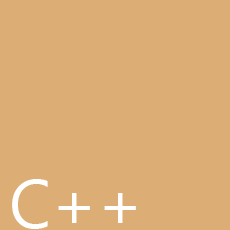
<style>
.page{position:relative;width:230px;height:230px;background:#dcad74}
.page>*{position:absolute;margin:0}
.t1{font:67.7px "Leelawadee";color:#ffffff}
</style>
<div class="page">
<p class="t1" style="left:12px;top:179px;width:124px;height:50px">C++</p>
</div>
